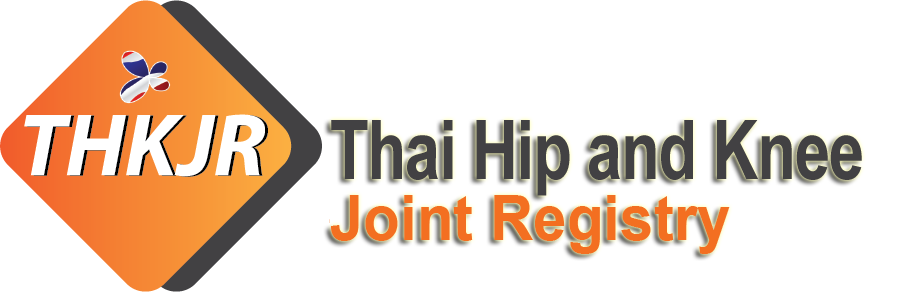
<style>
.page{position:relative;width:907px;height:292px;background:#ffffff}
.page>*{position:absolute;margin:0}
.t1{font:82.6px "Arial-BoldMT";letter-spacing:-0.02em;color:#424143;scale:0.77 1}
.t2{font:62.8px "Arial-BoldMT";color:#f36f21;scale:0.96 1}
</style>
<div class="page">
<p class="t1" style="left:331px;top:120px;width:531px;height:76px">Thai Hip and Knee</p>
<p class="t2" style="left:331px;top:195px;width:399px;height:59px">Joint Registry</p>
</div>
